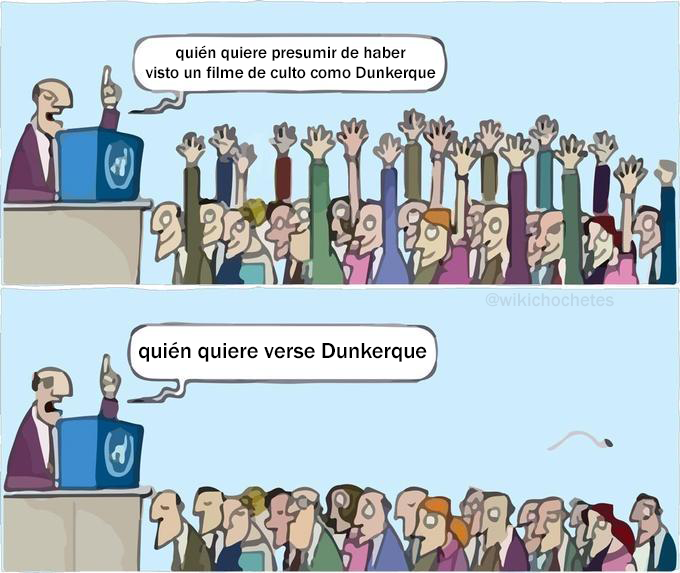
<style>
.page{position:relative;width:680px;height:573px;background:#cdecfe}
.page>*{position:absolute;margin:0}
.t1{font:17.1px "FranklinGothic-Medium";color:#000000}
.t2{font:18.9px "FranklinGothic-Medium";color:#bad7e8}
.t3{font:22.5px "FranklinGothic-Medium";color:#000000}
</style>
<div class="page">
<p class="t1" style="left:145px;top:45px;width:291px;height:36px;text-align:center">quién quiere presumir de haber<br>visto un filme de culto como Dunkerque</p>
<p class="t2" style="left:485px;top:293px;width:129px;height:14px">@wikichochetes</p>
<p class="t3" style="left:139px;top:341px;width:288px;height:21px">quién quiere verse Dunkerque</p>
</div>
